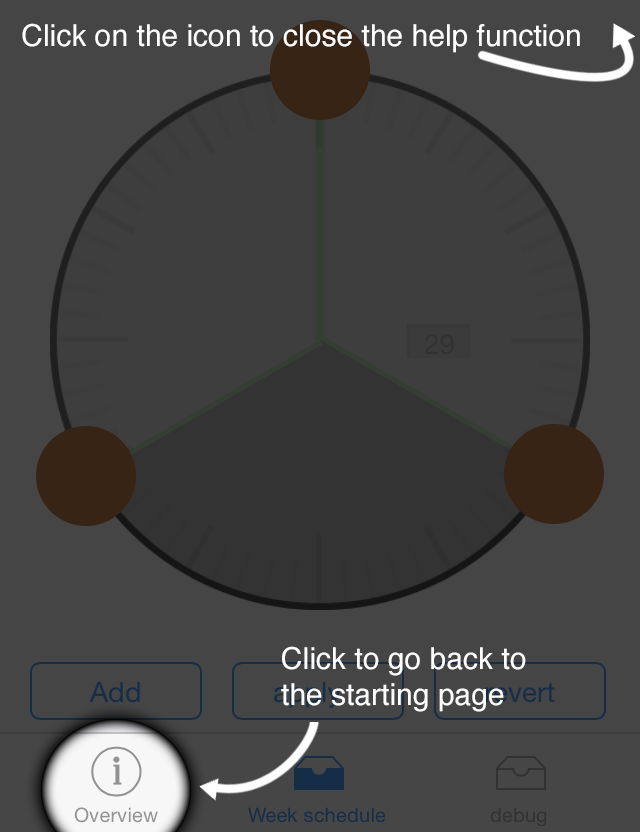
<style>
.page{position:relative;width:640px;height:832px;background:#454546}
.page>*{position:absolute;margin:0}
.t1{font:30px "Helvetica";color:#ffffff}
.t2{font:29.9px "Helvetica";color:#ffffff}
</style>
<div class="page">
<p class="t1" style="left:22px;top:23px;width:558px;height:30px">Click on the icon to close the help function</p>
<p class="t2" style="left:281px;top:646px;width:245px;height:66px">Click to go back to<br>the starting page</p>
</div>
